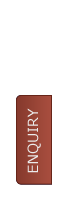
<style>
.page{position:relative;width:81px;height:203px;background:#ffffff}
.page>*{position:absolute;margin:0}
.t1{font:14px "Verdana";color:#ebebeb;text-transform:uppercase}
</style>
<div class="page">
<p class="t1" style="left:27px;top:108px;width:14px;height:65px;rotate:-90deg">Enquiry</p>
</div>
